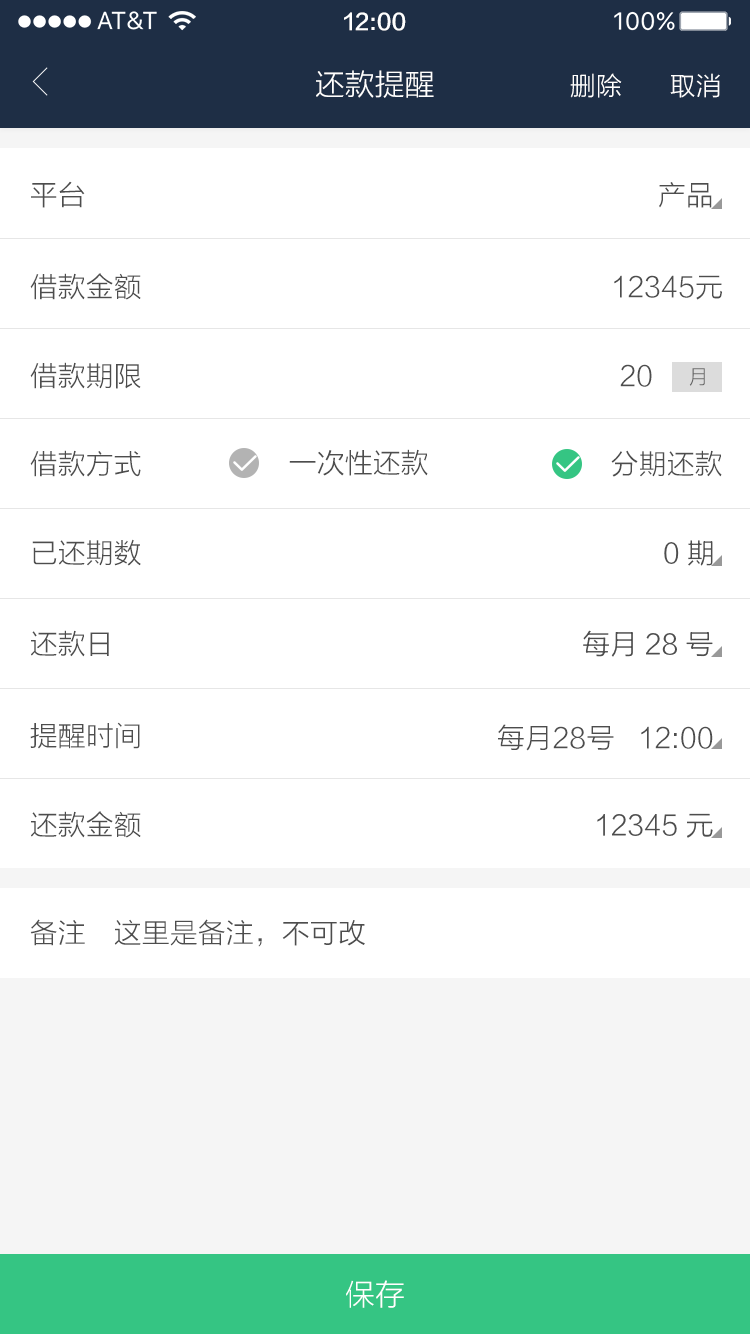
<style>
.page{position:relative;width:750px;height:1334px;background:#ffffff}
.page>*{position:absolute;margin:0}
.t1{font:22px "FZLTZHK--GBK1-0";color:#ffffff}
.t2{font:30px "FZLTXHK";color:#ffffff}
.t3{font:26px "FZLTXHK";color:#ffffff}
.t4{font:28px "FZLTXHK";color:#4d4d4d}
.t5{font:20px "FZLTXHK";color:#666666}
</style>
<div class="page">
<p class="t1" style="left:344px;top:12px;width:62px;height:19px">12:00</p>
<p class="t2" style="left:316px;top:70px;width:118px;height:28px">还款提醒</p>
<p class="t3" style="left:570px;top:73px;width:52px;height:25px">删除</p>
<p class="t3" style="left:670px;top:73px;width:50px;height:25px">取消</p>
<p class="t4" style="left:31px;top:181px;width:54px;height:27px">平台</p>
<p class="t4" style="left:659px;top:182px;width:53px;height:26px">产品</p>
<p class="t4" style="left:30px;top:273px;width:111px;height:27px">借款金额</p>
<p class="t4" style="left:614px;top:275px;width:108px;height:25px">12345元</p>
<p class="t4" style="left:30px;top:362px;width:111px;height:27px">借款期限</p>
<p class="t4" style="left:620px;top:364px;width:32px;height:23px">20</p>
<p class="t5" style="left:689px;top:368px;width:16px;height:18px">月</p>
<p class="t4" style="left:289px;top:449px;width:139px;height:27px">一次性还款</p>
<p class="t4" style="left:30px;top:450px;width:111px;height:27px">借款方式</p>
<p class="t4" style="left:611px;top:450px;width:111px;height:27px">分期还款</p>
<p class="t4" style="left:32px;top:539px;width:109px;height:27px">已还期数</p>
<p class="t4" style="left:664px;top:540px;width:49px;height:26px">0期</p>
<p class="t4" style="left:31px;top:630px;width:78px;height:27px">还款日</p>
<p class="t4" style="left:583px;top:630px;width:130px;height:27px">每月28号</p>
<p class="t4" style="left:30px;top:722px;width:110px;height:27px">提醒时间</p>
<p class="t4" style="left:498px;top:724px;width:215px;height:27px">每月28号   12:00</p>
<p class="t4" style="left:31px;top:811px;width:110px;height:27px">还款金额</p>
<p class="t4" style="left:597px;top:813px;width:116px;height:25px">12345元</p>
<p class="t4" style="left:30px;top:919px;width:55px;height:27px">备注</p>
<p class="t4" style="left:114px;top:919px;width:251px;height:28px">这里是备注，不可改</p>
<p class="t2" style="left:346px;top:1280px;width:58px;height:28px">保存</p>
</div>
